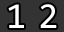
<style>
.page{position:relative;width:64px;height:32px;background:#333333}
.page>*{position:absolute;margin:0}
.t1{font:36.7px "Consolas";letter-spacing:0.01em;color:#ffffff}
</style>
<div class="page">
<p class="t1" style="left:8px;top:4px;width:16px;height:24px">1</p>
<p class="t1" style="left:40px;top:4px;width:17px;height:24px">2</p>
</div>
